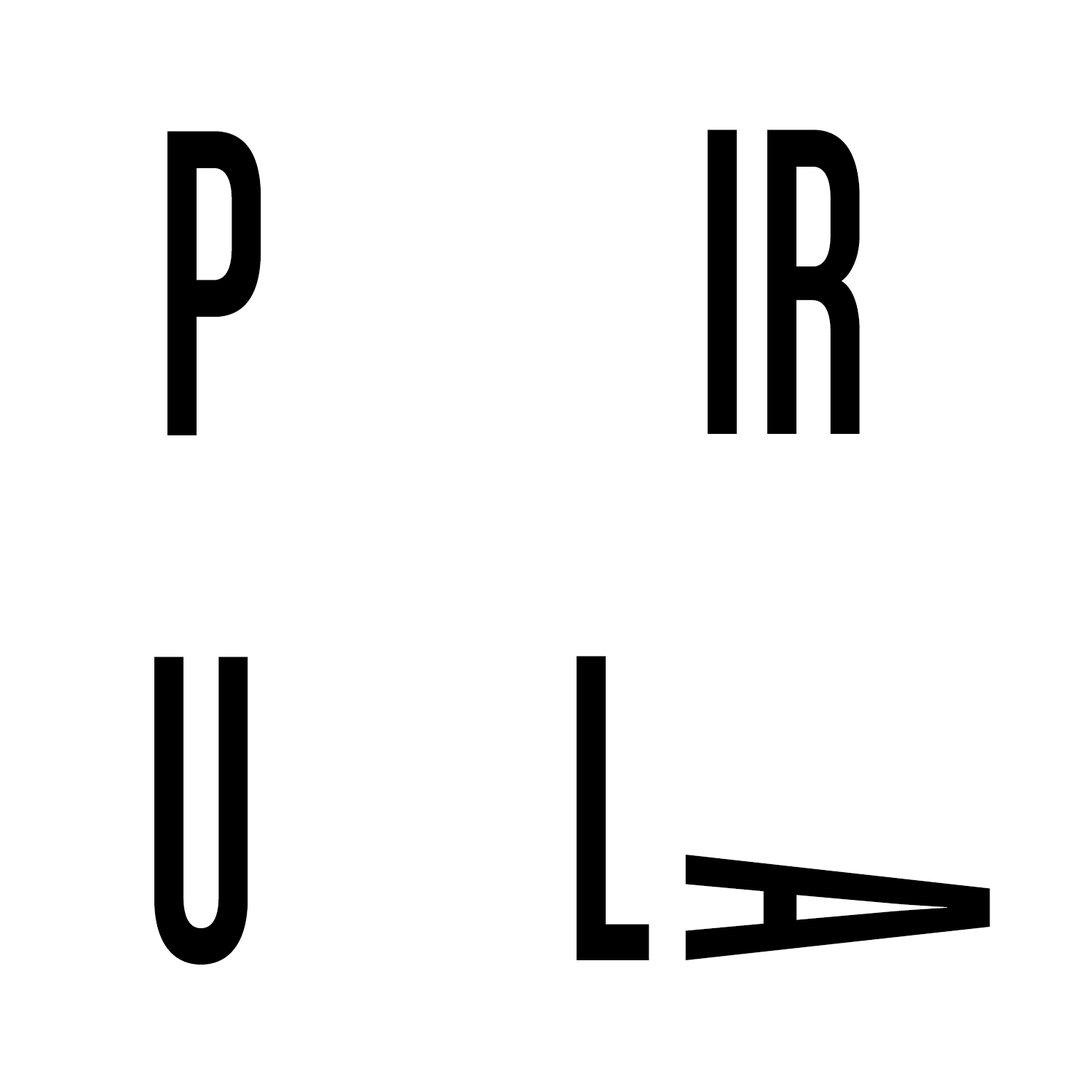
<style>
.page{position:relative;width:1092px;height:1092px;background:#ffffff}
.page>*{position:absolute;margin:0}
.t1{font:466.3px "ChaletComprime-CologneEighty";color:#000000;scale:0.73 1}
</style>
<div class="page">
<p class="t1" style="left:167px;top:131px;width:94px;height:304px">P</p>
<p class="t1" style="left:708px;top:130px;width:152px;height:304px">IR</p>
<p class="t1" style="left:154px;top:657px;width:94px;height:308px">U</p>
<p class="t1" style="left:577px;top:656px;width:72px;height:304px">L</p>
<p class="t1" style="left:685px;top:855px;width:305px;height:105px;rotate:90deg">A</p>
</div>
